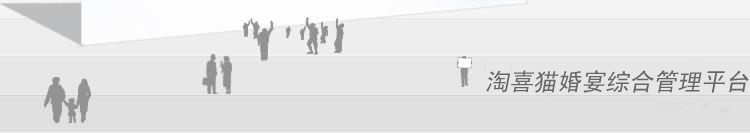
<style>
.page{position:relative;width:750px;height:133px}
.page>*{position:absolute;margin:0}
.t1{font:24px "SimHei";color:#666666;font-style:italic}
</style>
<div class="page">
<p class="t1" style="left:486px;top:70px;width:263px;height:23px">淘喜猫婚宴综合管理平台</p>
</div>
